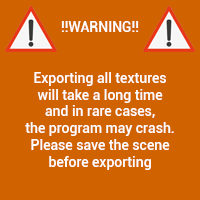
<style>
.page{position:relative;width:200px;height:200px;background:#d06200}
.page>*{position:absolute;margin:0}
.t1{font:14px "Roboto-Medium";color:#ffffff}
</style>
<div class="page">
<p class="t1" style="left:25px;top:21px;width:149px;height:149px;text-align:center">!!WARNING!!<br><br><br>Exporting all textures<br>will take a long time<br>and in rare cases,<br>the program may crash.<br>Please save the scene<br>before exporting</p>
</div>
